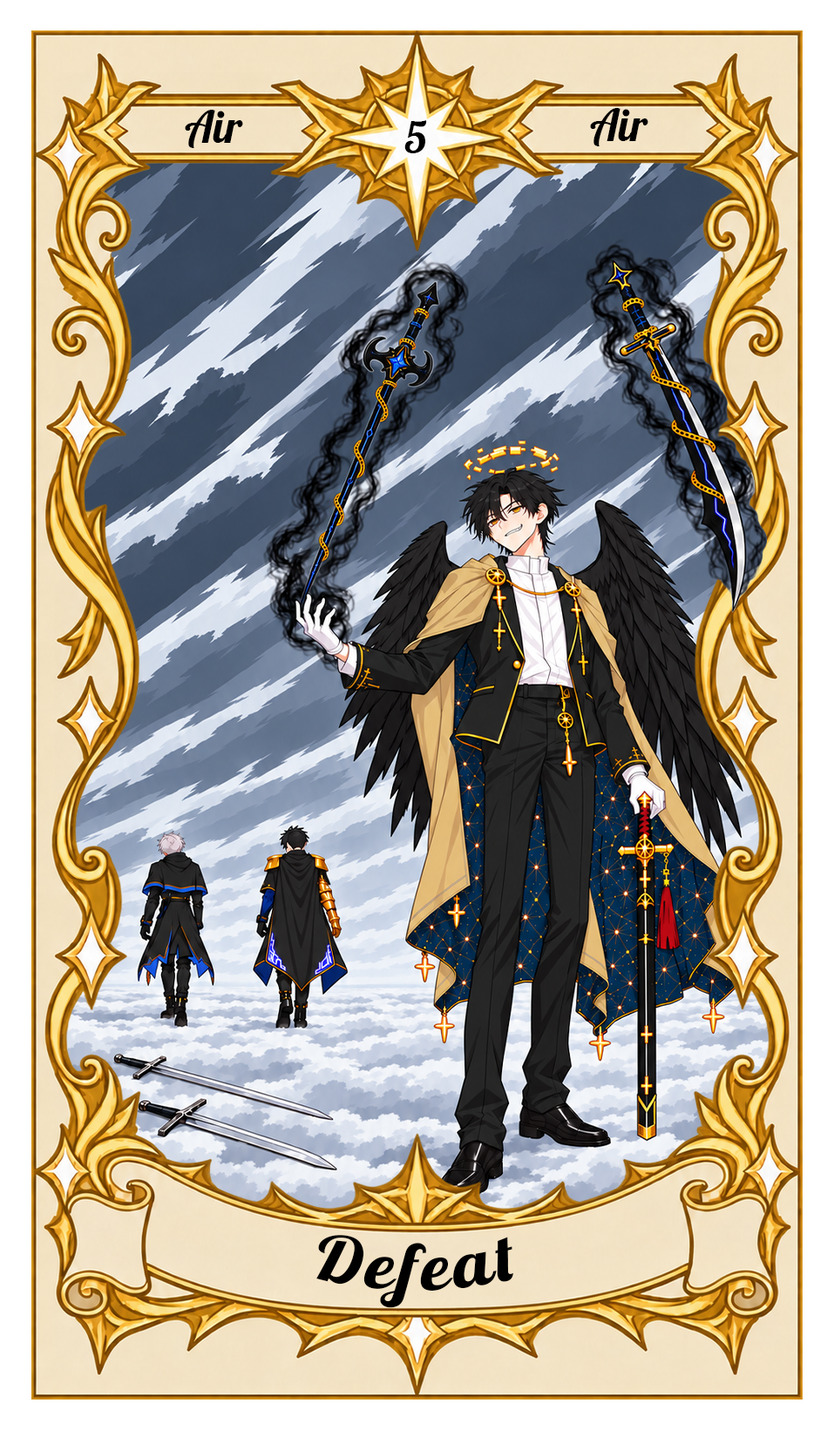
<style>
.page{position:relative;width:834px;height:1430px}
.page>*{position:absolute;margin:0}
.t1{font:43.6px "Lobster-Regular";color:#000000}
.t2{font:65.3px "Lobster-Regular";letter-spacing:0.05em;color:#000000}
</style>
<div class="page">
<p class="t1" style="left:185px;top:110px;width:58px;height:38px">Air</p>
<p class="t1" style="left:590px;top:108px;width:58px;height:38px">Air</p>
<p class="t1" style="left:404px;top:120px;width:23px;height:33px">5</p>
<p class="t2" style="left:316px;top:1235px;width:197px;height:73px">Defeat</p>
</div>
